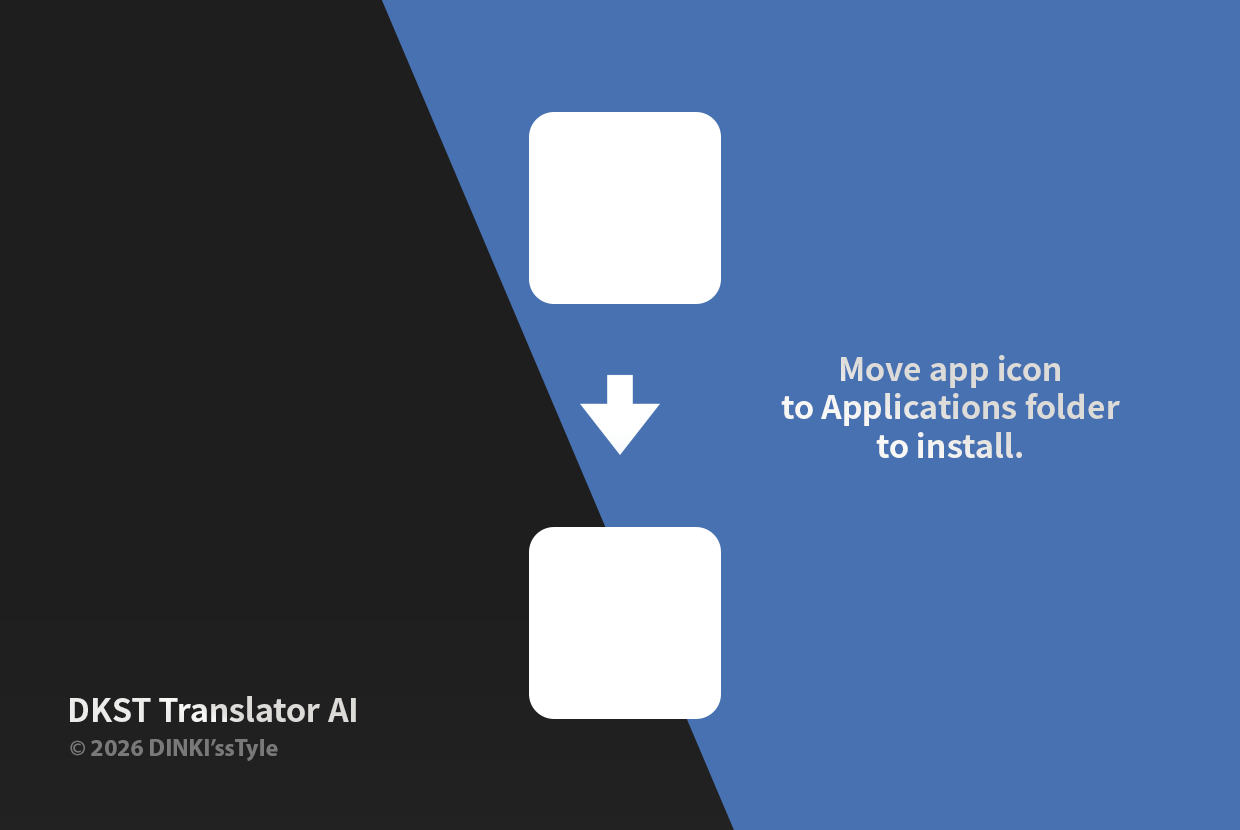
<style>
.page{position:relative;width:1240px;height:830px;background:#4871b2}
.page>*{position:absolute;margin:0}
.t1{font:32.1px "NotoSansCJKkr-Bold";color:#deddda}
.t2{font:32.1px "NotoSansCJKkr-Bold";color:#ecedea}
.t3{font:24px "MyriadPro-Bold";color:#797979}
</style>
<div class="page">
<p class="t1" style="left:781px;top:355px;width:339px;height:103px;text-align:center">Move app icon<br>to Applications folder<br>to install.</p>
<p class="t2" style="left:70px;top:696px;width:286px;height:26px">DKST Translator AI</p>
<p class="t3" style="left:70px;top:739px;width:208px;height:22px">© 2026 DINKI’ssTyle</p>
</div>
